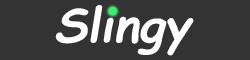
<style>
.page{position:relative;width:250px;height:60px;background:#333333}
.page>*{position:absolute;margin:0}
.t1{font:47.2px "ComicSansMS-BoldItalic";color:#ffffff}
</style>
<div class="page">
<p class="t1" style="left:55px;top:5px;width:139px;height:51px">Slingy</p>
</div>
